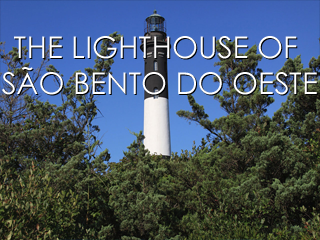
<style>
.page{position:relative;width:320px;height:240px}
.page>*{position:absolute;margin:0}
.t1{font:30px "CenturyGothic";color:#ffffff}
.t2{font:30px "CenturyGothic"}
</style>
<div class="page">
<p class="t1" style="left:2px;top:36px;width:315px;height:59px;text-align:center">THE LIGHTHOUSE OF <br>SÃO BENTO DO OESTE</p>
<p class="t2" style="left:3px;top:37px;width:315px;height:59px;text-align:center">THE LIGHTHOUSE OF <br>SÃO BENTO DO OESTE</p>
</div>
